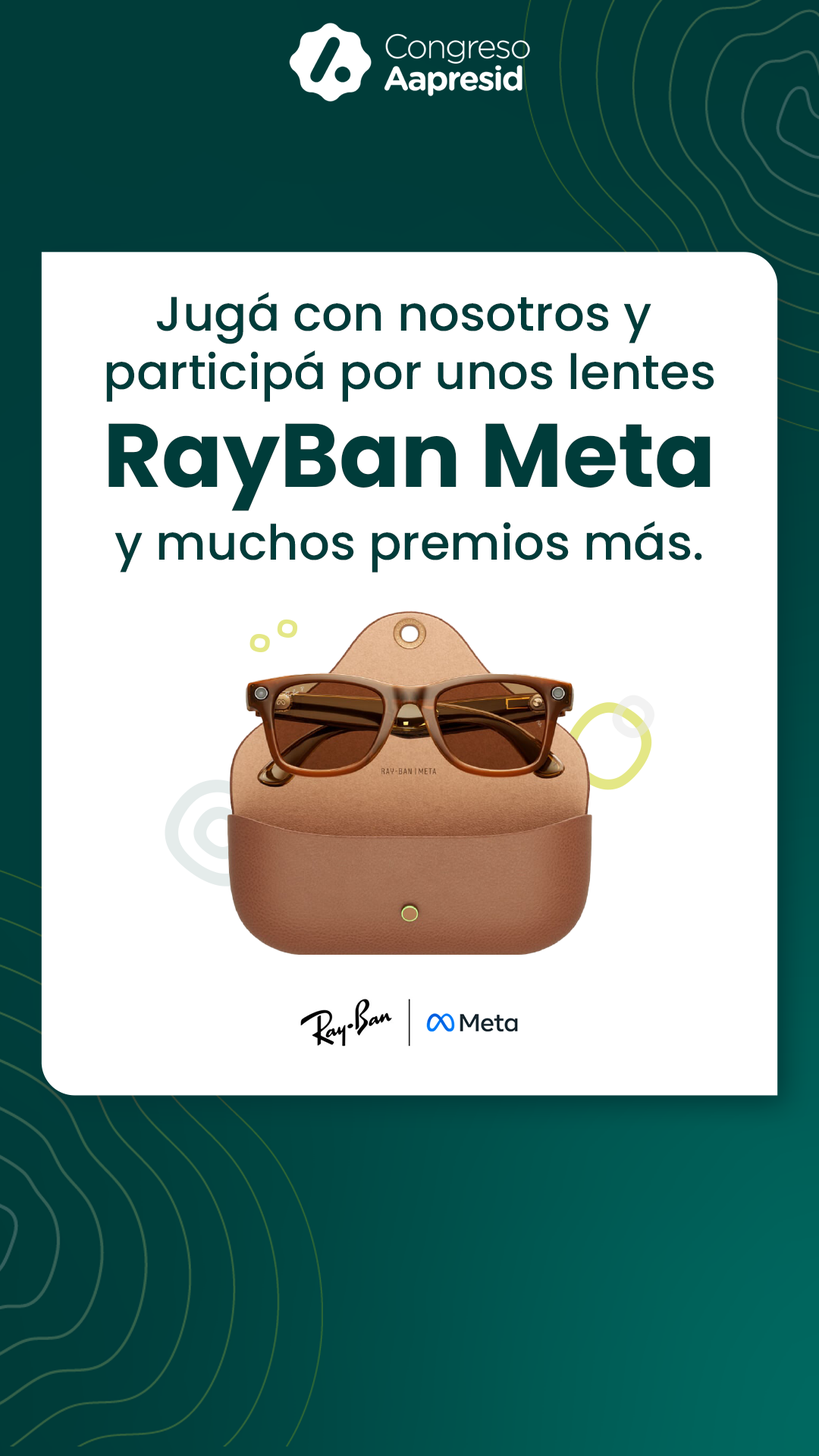
<style>
.page{position:relative;width:819px;height:1456px;background:#ffffff}
.page>*{position:absolute;margin:0}
.t1{font:48.6px "Poppins-Medium";color:#003c3a}
.t2{font:90.1px "Poppins-Bold";color:#003c3a}
</style>
<div class="page">
<p class="t1" style="left:106px;top:292px;width:608px;height:110px;text-align:center">Jugá con nosotros y <br>participá por unos lentes</p>
<p class="t2" style="left:108px;top:423px;width:603px;height:88px">RayBan Meta</p>
<p class="t1" style="left:115px;top:521px;width:587px;height:52px">y muchos premios más.</p>
</div>
